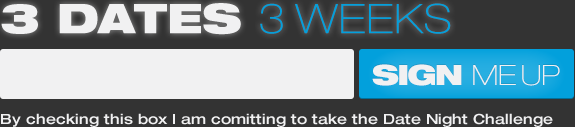
<style>
.page{position:relative;width:575px;height:127px;background:#333333}
.page>*{position:absolute;margin:0}
.t1{font:41px "HelveticaNeue-BlackExt";color:#f1f1f2;text-transform:uppercase}
.t2{font:41px "HelveticaNeue-ThinExt";letter-spacing:0.02em;color:#02a0dc;text-transform:uppercase}
.t3{font:28px "HelveticaNeue-ThinExt";letter-spacing:-0.02em;color:#f1f1f2;text-transform:uppercase}
.t4{font:28px "HelveticaNeue-BlackExt";letter-spacing:-0.06em;color:#f1f1f2;text-transform:uppercase}
.t5{font:14px "HelveticaNeue-MediumExt";color:#f1f1f2}
</style>
<div class="page">
<p class="t1" style="left:1px;top:3px;width:450px;height:32px">3 DATES <span class="t2">3 WEEKS</span></p>
<p class="t3" style="left:372px;top:64px;width:188px;height:22px"><span class="t4">SIGN </span>ME UP</p>
<p class="t5" style="left:1px;top:113px;width:552px;height:14px">By checking this box I am comitting to take the Date Night Challenge</p>
</div>
